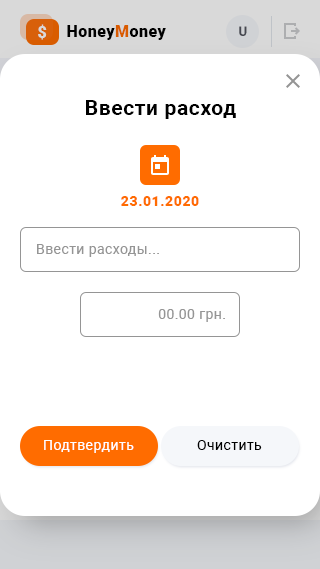
<style>
.page{position:relative;width:320px;height:569px;background:#ffffff}
.page>*{position:absolute;margin:0}
.t1{font:16px "Roboto-Black";letter-spacing:0.03em;color:#d9d9d9}
.t2{font:16px "Roboto-Black";letter-spacing:0.03em;color:#000000}
.t3{font:16px "Roboto-Black";letter-spacing:0.03em;color:#ff6c00}
.t4{font:13px "Roboto-Medium";letter-spacing:0.035em;color:#52555f}
.t5{font:21px "Roboto-Bold";letter-spacing:0.03em;color:#000000}
.t6{font:14px "Roboto-Black";letter-spacing:0.04em;color:#ff6c00}
.t7{font:14px "Roboto-Regular";letter-spacing:0.03em;color:#959595}
.t8{font:14px "Roboto-Regular";letter-spacing:0.03em;color:#ffffff}
.t9{font:14px "Roboto-Regular";letter-spacing:0.03em;color:#000000}
</style>
<div class="page">
<p class="t1" style="left:38px;top:24px;width:9px;height:16px">$</p>
<p class="t2" style="left:67px;top:25px;width:99px;height:15px">Honey<span class="t3">M</span>oney</p>
<p class="t4" style="left:239px;top:26px;width:8px;height:10px">U</p>
<p class="t5" style="left:86px;top:100px;width:150px;height:19px">Ввести расход</p>
<p class="t6" style="left:121px;top:196px;width:78px;height:10px">23.01.2020</p>
<p class="t7" style="left:37px;top:244px;width:122px;height:13px">Ввести расходы...</p>
<p class="t7" style="left:158px;top:309px;width:67px;height:13px">00.00 грн.</p>
<p class="t8" style="left:44px;top:440px;width:90px;height:13px">Подтвердить</p>
<p class="t9" style="left:197px;top:440px;width:65px;height:10px">Очистить</p>
</div>
